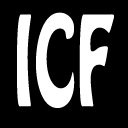
<style>
.page{position:relative;width:128px;height:128px;background:#000000}
.page>*{position:absolute;margin:0}
.t1{font:110.2px "HoboStd";color:#ffffff;scale:0.59 1}
</style>
<div class="page">
<p class="t1" style="left:17px;top:12px;width:97px;height:96px">ICF</p>
</div>
